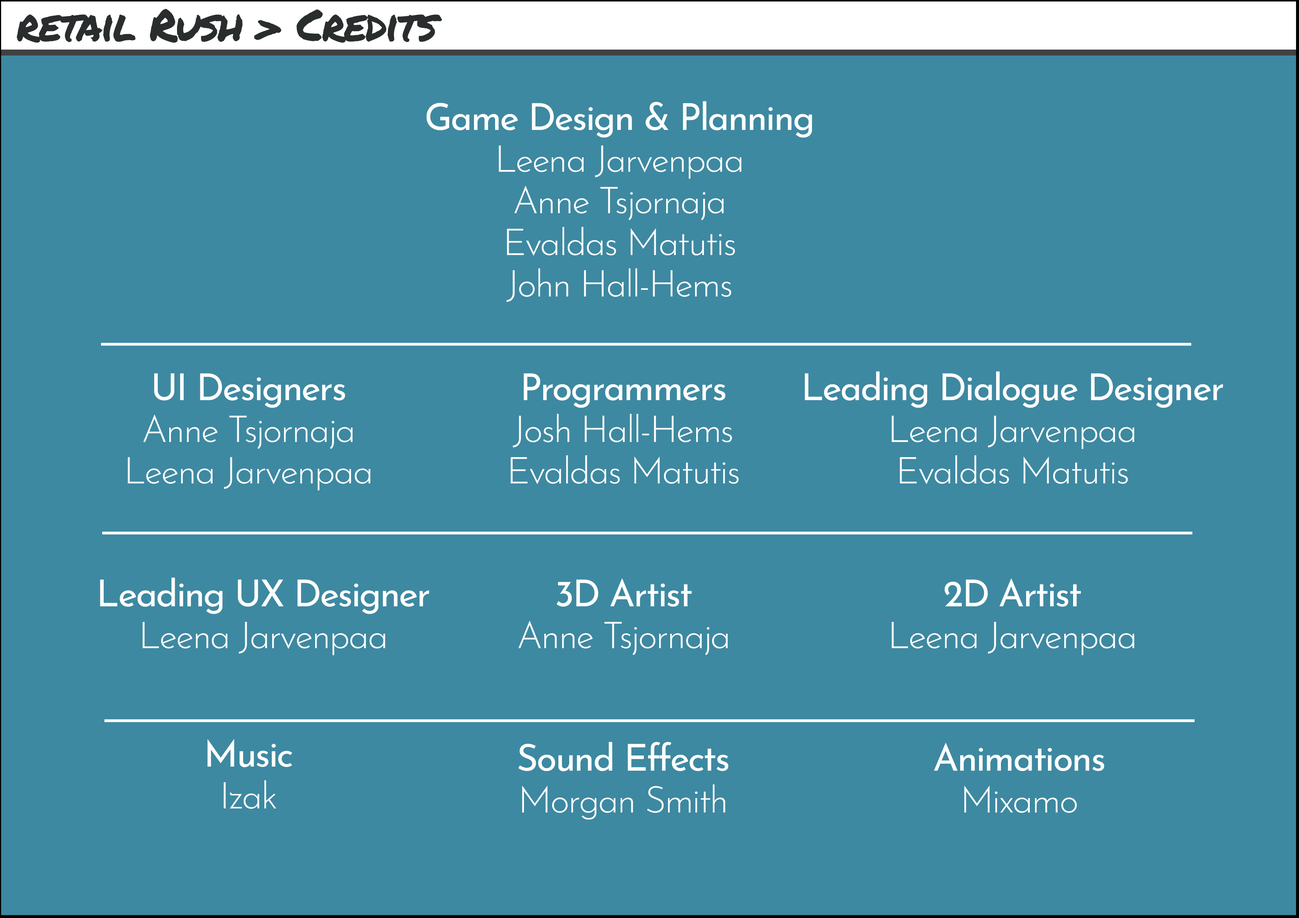
<style>
.page{position:relative;width:1299px;height:918px;background:#3d89a1}
.page>*{position:absolute;margin:0}
.t1{font:44px "PermanentMarker-Regular";letter-spacing:-0.04em;color:#2a2d2d}
.t2{font:37px/41.6px "JosefinSans-Light";letter-spacing:-0.04em;color:#ffffff}
.t3{font:37px/41.6px "JosefinSans-Regular";letter-spacing:-0.04em;color:#ffffff}
</style>
<div class="page">
<p class="t1" style="left:17px;top:9px;width:425px;height:34px">retail Rush &gt; Credits</p>
<p class="t2" style="left:426px;top:101px;width:386px;height:201px;text-align:center"><span class="t3">Game Design &amp; Planning<br></span>Leena Jarvenpaa<br>Anne Tsjornaja<br>Evaldas Matutis<br>John Hall-Hems</p>
<p class="t2" style="left:128px;top:373px;width:242px;height:118px;text-align:center"><span class="t3">UI Designers<br></span>Anne Tsjornaja<br>Leena Jarvenpaa</p>
<p class="t2" style="left:511px;top:373px;width:228px;height:111px;text-align:center"><span class="t3">Programmers<br></span>Josh Hall-Hems<br>Evaldas Matutis</p>
<p class="t2" style="left:804px;top:371px;width:419px;height:113px;text-align:center"><span class="t3">Leading Dialogue Designer<br></span>Leena Jarvenpaa<br>Evaldas Matutis</p>
<p class="t3" style="left:100px;top:578px;width:329px;height:77px;text-align:center">Leading UX Designer<br><span class="t2">Leena Jarvenpaa</span></p>
<p class="t2" style="left:518px;top:578px;width:209px;height:77px;text-align:center"><span class="t3">3D Artist<br></span>Anne Tsjornaja</p>
<p class="t2" style="left:891px;top:578px;width:243px;height:77px;text-align:center"><span class="t3">2D Artist<br></span>Leena Jarvenpaa</p>
<p class="t3" style="left:207px;top:739px;width:85px;height:70px;text-align:center">Music<br><span class="t2">Izak</span></p>
<p class="t3" style="left:518px;top:742px;width:210px;height:78px;text-align:center">Sound Effects<br><span class="t2">Morgan Smith</span></p>
<p class="t3" style="left:934px;top:743px;width:170px;height:70px;text-align:center">Animations<br><span class="t2">Mixamo</span></p>
</div>
